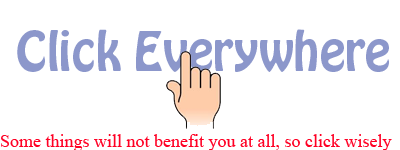
<style>
.page{position:relative;width:400px;height:150px;background:#ffffff}
.page>*{position:absolute;margin:0}
.t1{font:48px "HoboStd";color:#8c97cb}
.t2{font:18px "TimesNewRomanPSMT";color:#ff0024}
</style>
<div class="page">
<p class="t1" style="left:17px;top:29px;width:372px;height:43px">Click Everywhere</p>
<p class="t2" style="left:1px;top:134px;width:391px;height:17px">Some things will not benefit you at all, so click wisely</p>
</div>
